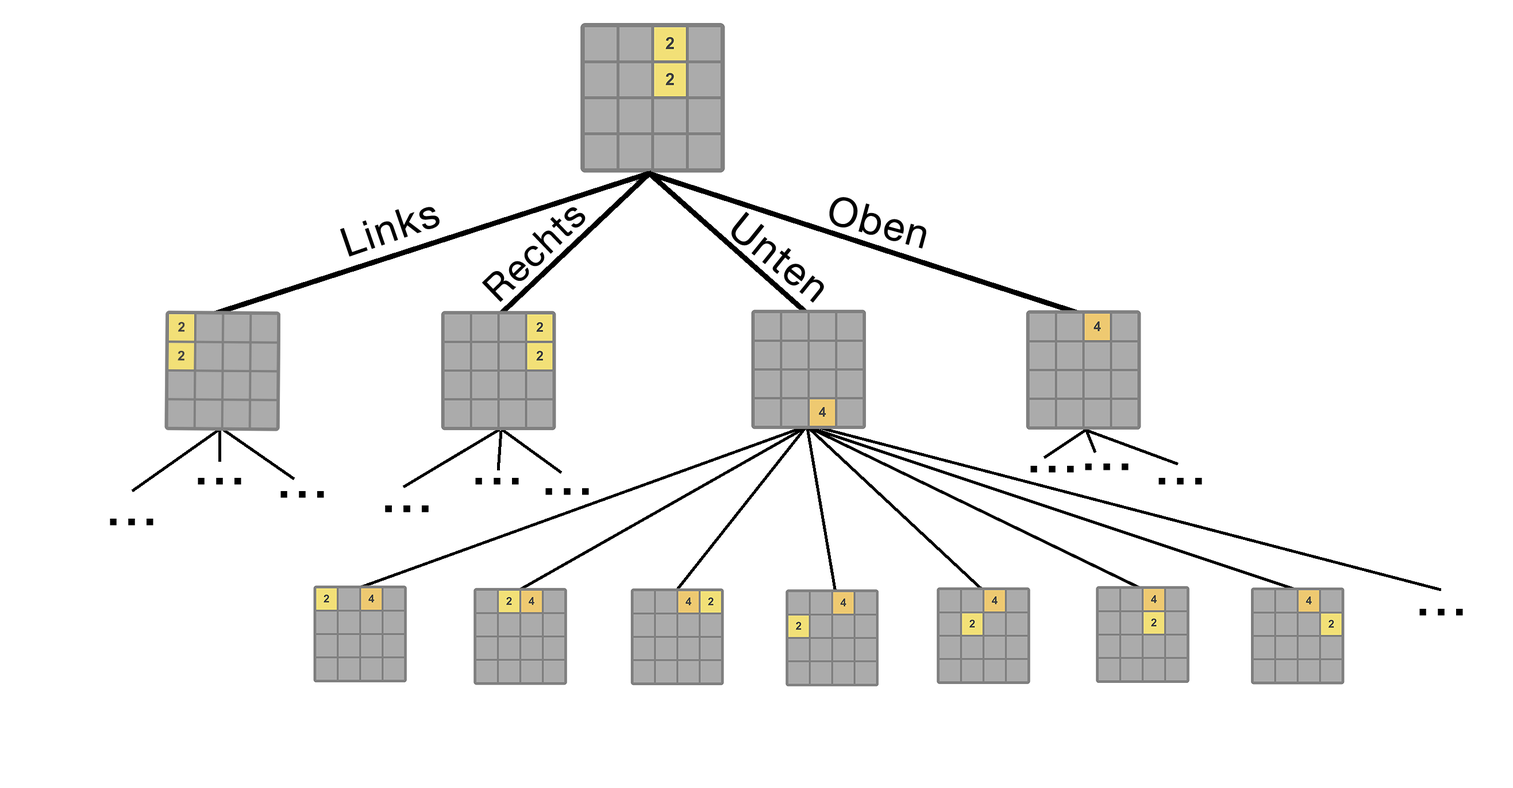
<style>
.page{position:relative;width:1513px;height:788px;background:#ffffff}
.page>*{position:absolute;margin:0}
.t1{font:40.2px "HelveticaNeue";letter-spacing:0.04em;color:#000000}
.t2{font:37.3px "HelveticaNeue";letter-spacing:0.04em;color:#000000}
.t3{font:57.5px "HelveticaNeue";letter-spacing:0.04em;color:#000000}
</style>
<div class="page">
<p class="t1" style="left:829px;top:197px;width:97px;height:52px;rotate:15deg">Oben</p>
<p class="t1" style="left:340px;top:207px;width:100px;height:50px;rotate:-19deg">Links</p>
<p class="t2" style="left:481px;top:207px;width:104px;height:95px;rotate:-44deg">Rechts</p>
<p class="t1" style="left:731px;top:211px;width:93px;height:92px;rotate:39deg">Unten</p>
<p class="t3" style="left:1030px;top:466px;width:44px;height:7px">...</p>
<p class="t3" style="left:1085px;top:464px;width:43px;height:7px">...</p>
<p class="t3" style="left:198px;top:478px;width:43px;height:7px">...</p>
<p class="t3" style="left:475px;top:478px;width:44px;height:7px">...</p>
<p class="t3" style="left:1158px;top:478px;width:44px;height:7px">...</p>
<p class="t3" style="left:280px;top:491px;width:44px;height:7px">...</p>
<p class="t3" style="left:545px;top:488px;width:44px;height:7px">...</p>
<p class="t3" style="left:385px;top:506px;width:44px;height:6px">...</p>
<p class="t3" style="left:385px;top:506px;width:44px;height:6px">...</p>
<p class="t3" style="left:110px;top:519px;width:43px;height:7px">...</p>
<p class="t3" style="left:1419px;top:609px;width:44px;height:7px">...</p>
</div>
